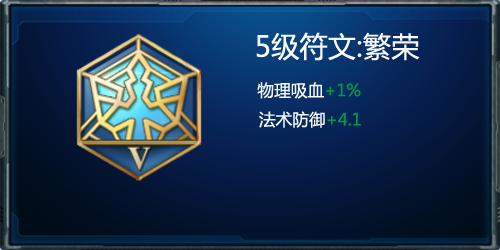
<style>
.page{position:relative;width:500px;height:250px}
.page>*{position:absolute;margin:0}
.t1{font:28.3px "MicrosoftYaHei";color:#f7faf8}
.t2{font:16.7px "MicrosoftYaHei";color:#f7faf8}
.t3{font:16.7px "MicrosoftYaHei";color:#009944}
</style>
<div class="page">
<p class="t1" style="left:256px;top:32px;width:164px;height:96px;text-align:center">5级符文:繁荣<br><span class="t2">        物理吸血</span><span class="t3">+1%<br></span><span class="t2">  法术防御</span><span class="t3">+4.1</span></p>
</div>
